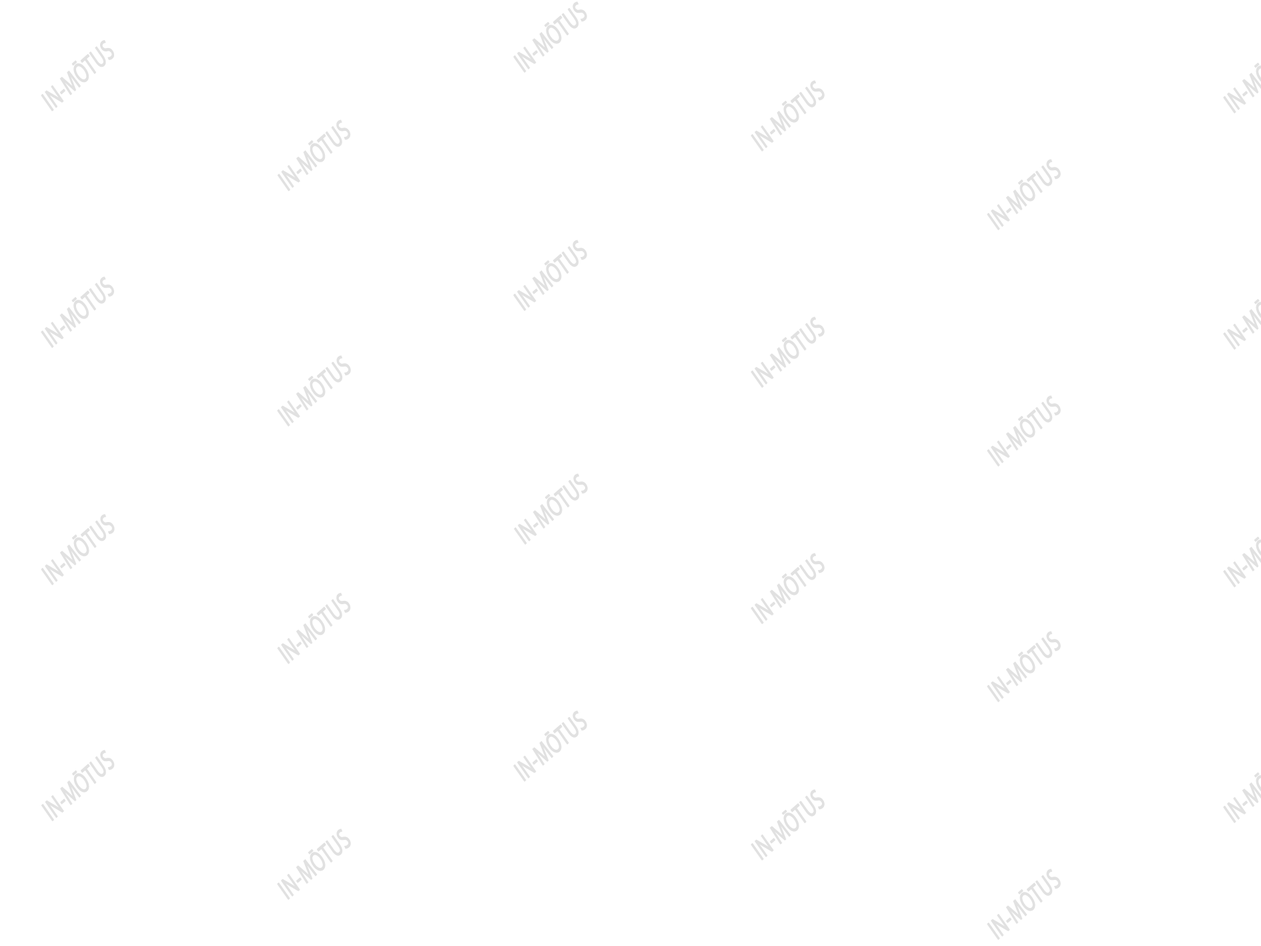
<style>
.page{position:relative;width:1261px;height:946px;background:#ffffff}
.page>*{position:absolute;margin:0}
.t1{font:27.8px "MyriadPro-Regular";color:#e1e1e1;font-weight:bold;scale:0.69 1}
</style>
<div class="page">
<p class="t1" style="left:513px;top:1px;width:74px;height:72px;rotate:-41deg">IN-MŌTUS</p>
<p class="t1" style="left:41px;top:40px;width:73px;height:71px;rotate:-41deg">IN-MŌTUS</p>
<p class="t1" style="left:751px;top:80px;width:74px;height:71px;rotate:-41deg">IN-MŌTUS</p>
<p class="t1" style="left:278px;top:119px;width:73px;height:73px;rotate:-42deg">IN-MŌTUS</p>
<p class="t1" style="left:987px;top:159px;width:74px;height:71px;rotate:-41deg">IN-MŌTUS</p>
<p class="t1" style="left:513px;top:240px;width:74px;height:71px;rotate:-41deg">IN-MŌTUS</p>
<p class="t1" style="left:41px;top:276px;width:73px;height:72px;rotate:-41deg">IN-MŌTUS</p>
<p class="t1" style="left:751px;top:316px;width:74px;height:72px;rotate:-41deg">IN-MŌTUS</p>
<p class="t1" style="left:277px;top:355px;width:74px;height:71px;rotate:-41deg">IN-MŌTUS</p>
<p class="t1" style="left:987px;top:395px;width:74px;height:71px;rotate:-41deg">IN-MŌTUS</p>
<p class="t1" style="left:514px;top:473px;width:74px;height:71px;rotate:-41deg">IN-MŌTUS</p>
<p class="t1" style="left:41px;top:514px;width:74px;height:71px;rotate:-41deg">IN-MŌTUS</p>
<p class="t1" style="left:751px;top:552px;width:74px;height:72px;rotate:-41deg">IN-MŌTUS</p>
<p class="t1" style="left:277px;top:593px;width:74px;height:71px;rotate:-41deg">IN-MŌTUS</p>
<p class="t1" style="left:987px;top:631px;width:74px;height:71px;rotate:-41deg">IN-MŌTUS</p>
<p class="t1" style="left:513px;top:710px;width:74px;height:71px;rotate:-41deg">IN-MŌTUS</p>
<p class="t1" style="left:41px;top:749px;width:74px;height:72px;rotate:-41deg">IN-MŌTUS</p>
<p class="t1" style="left:751px;top:789px;width:74px;height:71px;rotate:-41deg">IN-MŌTUS</p>
<p class="t1" style="left:277px;top:828px;width:74px;height:71px;rotate:-41deg">IN-MŌTUS</p>
<p class="t1" style="left:987px;top:868px;width:74px;height:72px;rotate:-41deg">IN-MŌTUS</p>
</div>
